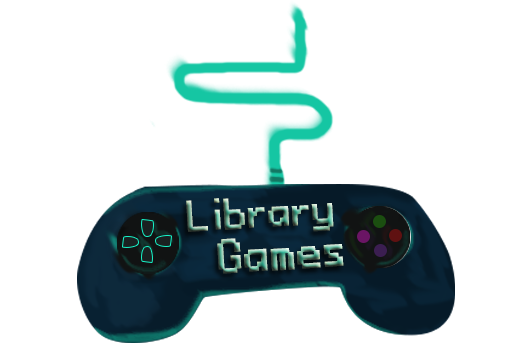
<style>
.page{position:relative;width:527px;height:350px;background:#ffffff}
.page>*{position:absolute;margin:0}
.t1{font:45.5px "Power-Red-and-Green";font-weight:bold}
.t2{font:50.5px "Power-Red-and-Green";font-weight:bold}
</style>
<div class="page">
<p class="t1" style="left:186px;top:198px;width:148px;height:34px;rotate:-3deg">Library</p>
<p class="t2" style="left:217px;top:238px;width:127px;height:36px;rotate:-3deg">Games</p>
</div>
